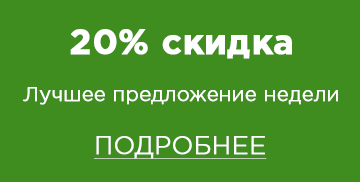
<style>
.page{position:relative;width:360px;height:182px;background:#3e8d1e}
.page>*{position:absolute;margin:0}
.t1{font:35px "GothamPro-Bold";color:#ffffff;font-weight:bold}
.t2{font:20px "GothamPro-Light";color:#ffffff;font-weight:bold}
.t3{font:25px "GothamPro-Light";color:#ffffff;text-transform:uppercase;font-weight:bold;text-decoration:underline}
</style>
<div class="page">
<p class="t1" style="left:70px;top:29px;width:222px;height:30px">20% скидка</p>
<p class="t2" style="left:23px;top:87px;width:315px;height:18px">Лучшее предложение недели</p>
<p class="t3" style="left:94px;top:136px;width:173px;height:23px">Подробнее</p>
</div>
